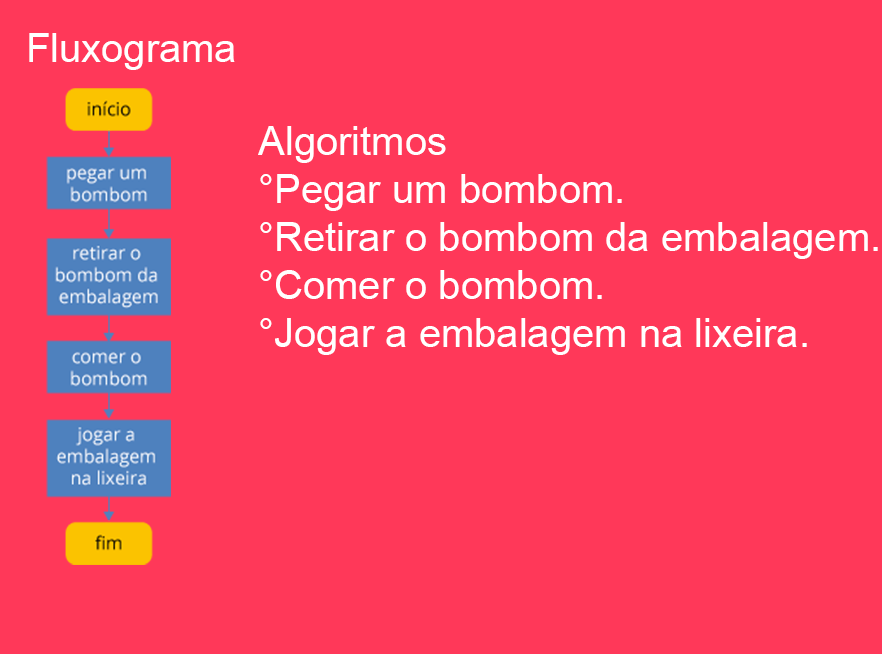
<style>
.page{position:relative;width:882px;height:654px;background:#ff3859}
.page>*{position:absolute;margin:0}
.t1{font:40px "ArialMT";color:#ffffff}
</style>
<div class="page">
<p class="t1" style="left:29px;top:33px;width:206px;height:37px">Fluxograma</p>
<p class="t1" style="left:258px;top:126px;width:620px;height:229px">Algoritmos<br>°Pegar um bombom.<br>°Retirar o bombom da embalagem.<br>°Comer o bombom.<br>°Jogar a embalagem na lixeira.</p>
</div>
